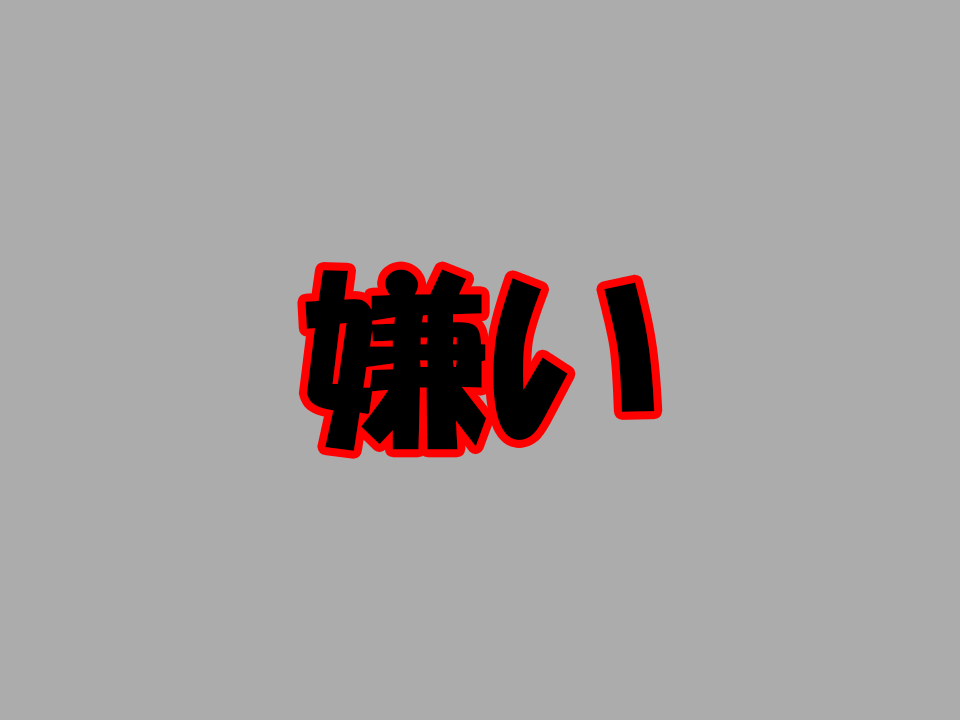
<style>
.page{position:relative;width:960px;height:720px;background:#acacac}
.page>*{position:absolute;margin:0}
.t1{font:187.5px "HGPSoeiKakupoptai";color:#000000}
</style>
<div class="page">
<p class="t1" style="left:305px;top:269px;width:350px;height:182px">嫌い</p>
</div>
